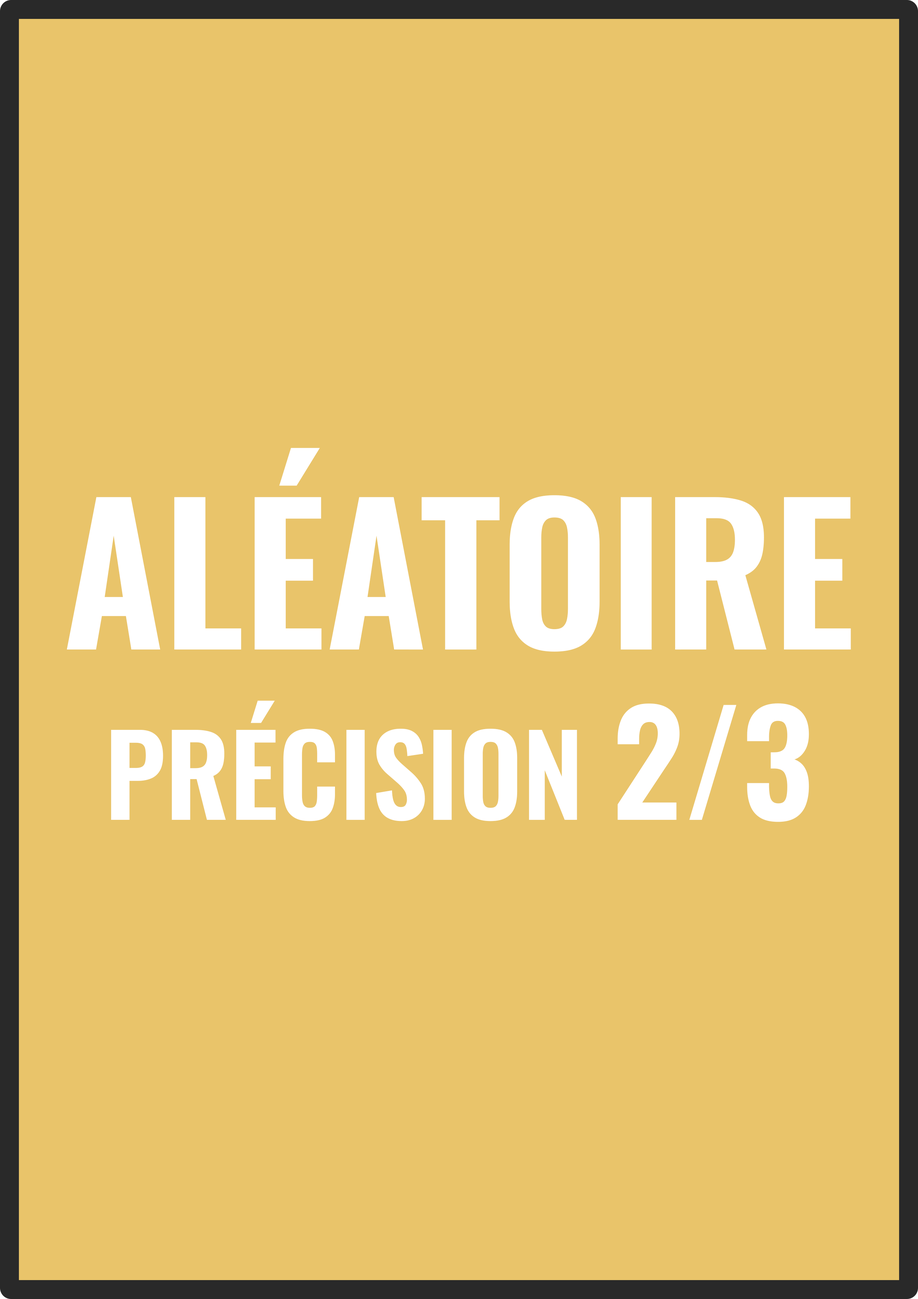
<style>
.page{position:relative;width:918px;height:1299px;background:#e9c46a}
.page>*{position:absolute;margin:0}
.t1{font:188.2px "Oswald-SemiBold";color:#ffffff}
.t2{font:111.1px "Oswald-SemiBold";color:#ffffff}
.t3{font:141.9px "Oswald-SemiBold";color:#ffffff}
</style>
<div class="page">
<p class="t1" style="left:67px;top:448px;width:784px;height:374px;text-align:center">ALÉATOIRE<br><span class="t2">PRÉCISION </span><span class="t3">2/3</span></p>
</div>
